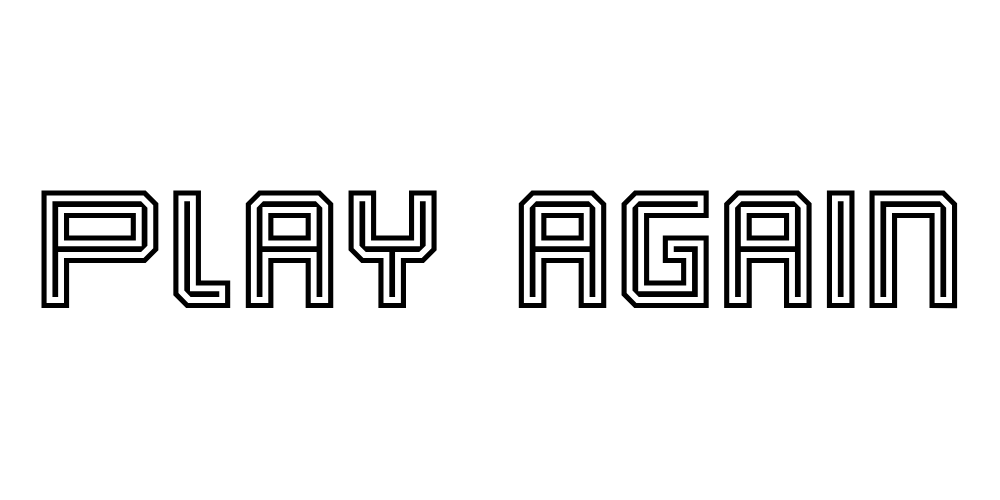
<style>
.page{position:relative;width:1000px;height:500px;background:#ffffff}
.page>*{position:absolute;margin:0}
.t1{font:150px "KarnivoreTecca";color:#000000}
</style>
<div class="page">
<p class="t1" style="left:41px;top:190px;width:917px;height:119px">Play again</p>
</div>
